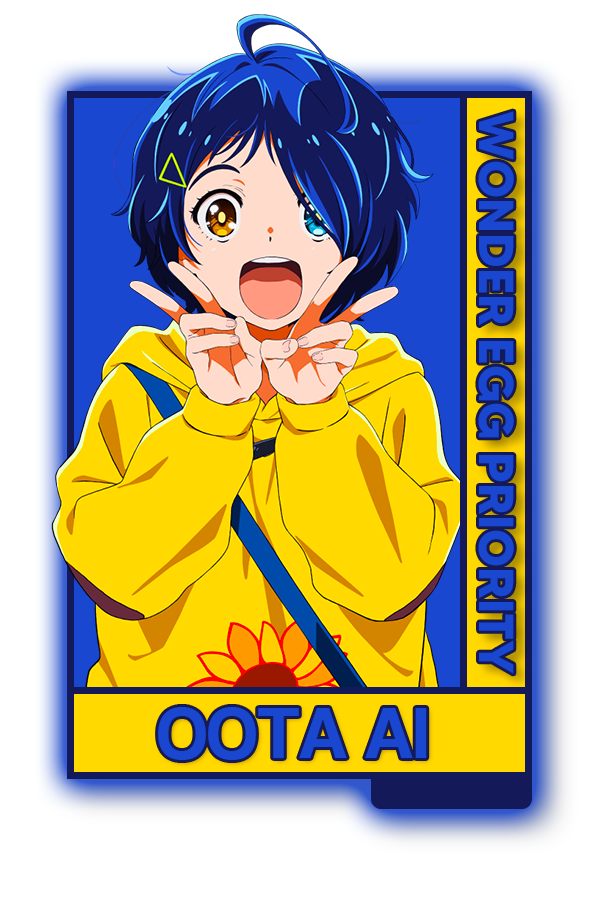
<style>
.page{position:relative;width:600px;height:900px;background:#ffffff}
.page>*{position:absolute;margin:0}
.t1{font:48.8px "MADETOMMY-Bold";color:#1947cf}
.t2{font:75px "CoolveticaRg-Regular";color:#1947cf}
</style>
<div class="page">
<p class="t1" style="left:478px;top:111px;width:36px;height:563px;rotate:90deg">WONDER EGG PRIORITY</p>
<p class="t2" style="left:158px;top:707px;width:269px;height:53px">OOTA AI</p>
</div>
